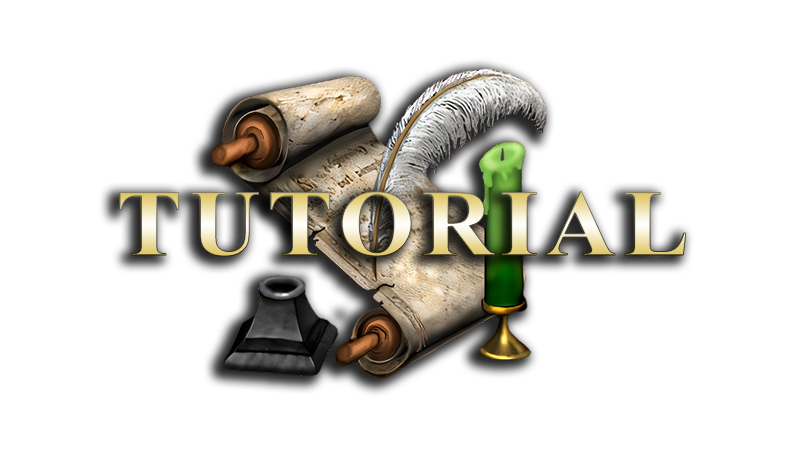
<style>
.page{position:relative;width:800px;height:472px;background:#ffffff}
.page>*{position:absolute;margin:0}
.t1{font:94px "TimesNewRomanPS-BoldMT";letter-spacing:0.07em;scale:1.05 1}
</style>
<div class="page">
<p class="t1" style="left:119px;top:191px;width:567px;height:66px">TUTORIAL</p>
</div>
